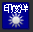
<style>
.page{position:relative;width:33px;height:32px;background:#000090}
.page>*{position:absolute;margin:0}
.t1{font:10.4px "SimSun";letter-spacing:-0.25em;color:#ffffff}
</style>
<div class="page">
<p class="t1" style="left:4px;top:4px;width:24px;height:9px">印度洋</p>
</div>
